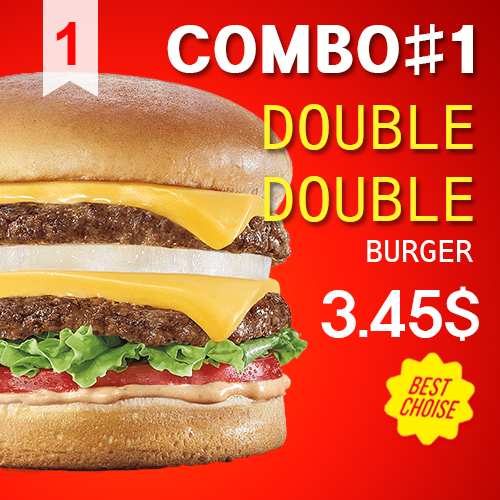
<style>
.page{position:relative;width:500px;height:500px}
.page>*{position:absolute;margin:0}
.t1{font:60px "Arial-BoldMT";color:#ff0404}
.t2{font:55px "HeadlineR-HM";color:#fffffe}
.t3{font:60px "DejaVuSansMono";color:#fff32b}
.t4{font:30px "DejaVuSansMono";color:#ffffff}
.t5{font:60px "ExpoM-HM";color:#ffffff}
</style>
<div class="page">
<p class="t1" style="left:56px;top:22px;width:20px;height:43px">1</p>
<p class="t2" style="left:167px;top:24px;width:306px;height:51px">COMBO#1</p>
<p class="t3" style="left:264px;top:104px;width:209px;height:118px;text-align:center">DOUBLE<br>DOUBLE</p>
<p class="t4" style="left:367px;top:240px;width:106px;height:22px">BURGER</p>
<p class="t5" style="left:321px;top:286px;width:158px;height:55px">3.45$</p>
</div>
